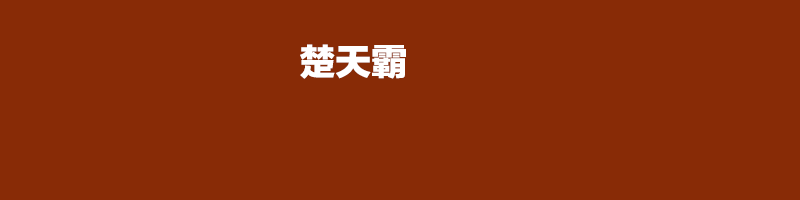
<style>
.page{position:relative;width:800px;height:200px;background:#882b06}
.page>*{position:absolute;margin:0}
.t1{font:36px "FZLTTHK--GBK1-0";color:#ffffff}
</style>
<div class="page">
<p class="t1" style="left:300px;top:44px;width:106px;height:35px">楚天霸</p>
</div>
